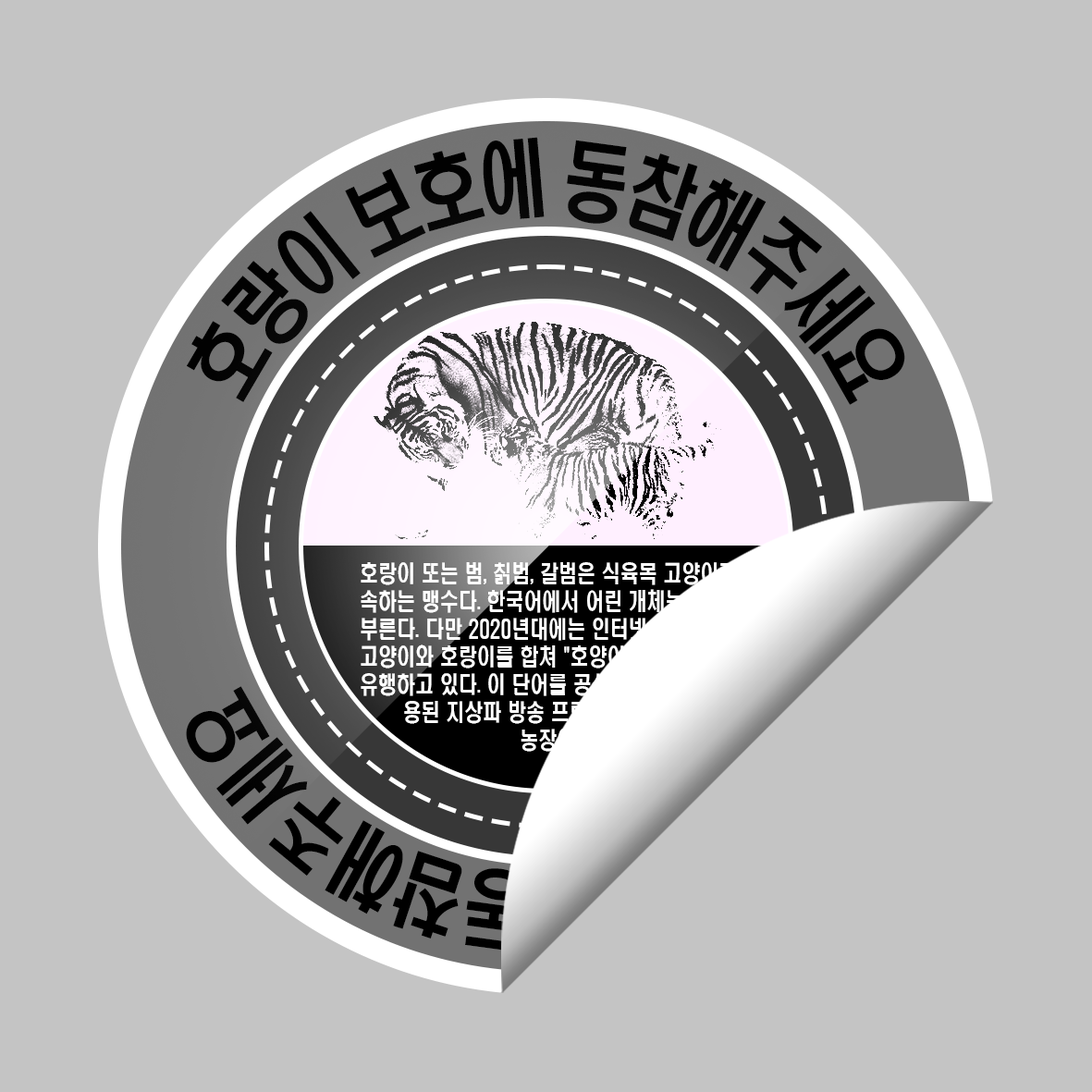
<style>
.page{position:relative;width:1092px;height:1092px;background:#c4c4c4}
.page>*{position:absolute;margin:0}
.t1{font:84.8px "H2hdrM";letter-spacing:-0.15em;color:#000000;scale:0.8 1}
.t2{font:23.1px "H2hdrM";color:#ffffff;scale:0.8 1}
</style>
<div class="page">
<p class="t1" style="left:187px;top:137px;width:718px;height:268px">호랑이 보호에 동참해주세요</p>
<p class="t2" style="left:361px;top:562px;width:403px;height:190px">호랑이 또는 범, 칡범, 갈범은 식육목 고양이과에 속하는 맹수다. 한국어에서 어린 개체는 개호주라 부른다. 다만 2020년대에는 인터넷 신조어로 고양이와 호랑이를 합쳐 "호양이" 라는 단어가              유행하고 있다. 이 단어를 공식적으로 처음 사<br>       용된 지상파 방송 프로그램 TV 동물<br>                          농장이다.</p>
</div>
